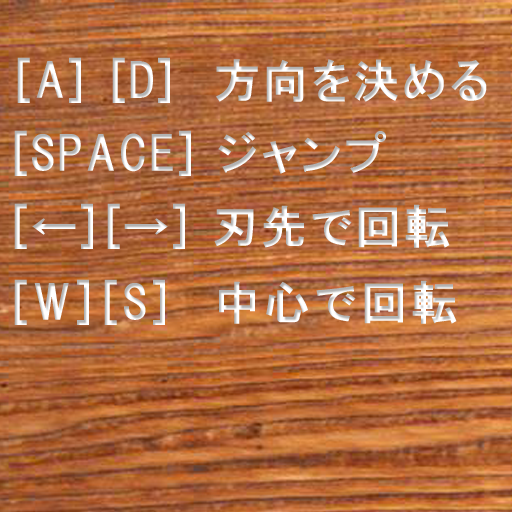
<style>
.page{position:relative;width:512px;height:512px}
.page>*{position:absolute;margin:0}
.t1{font:46px "HGPGothicE";letter-spacing:0.05em}
.t2{font:46px "HGPGothicE";letter-spacing:0.046em}
.t3{font:46px "HGPGothicE";letter-spacing:0.06em}
.t4{font:46px "HGPGothicE";letter-spacing:0.09em}
</style>
<div class="page">
<p class="t1" style="left:17px;top:57px;width:470px;height:46px">[A] [D]  方向を決める</p>
<p class="t2" style="left:14px;top:130px;width:372px;height:46px">[SPACE] ジャンプ</p>
<p class="t3" style="left:14px;top:203px;width:436px;height:46px">[←][→] 刃先で回転</p>
<p class="t4" style="left:14px;top:279px;width:443px;height:46px">[W][S]  中心で回転</p>
</div>
